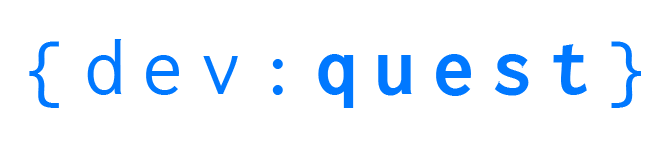
<style>
.page{position:relative;width:671px;height:149px;background:#ffffff}
.page>*{position:absolute;margin:0}
.t1{font:83.1px "Inconsolata-Regular";letter-spacing:0.2em;color:#0078ff}
.t2{font:83.1px "Inconsolata-Bold";letter-spacing:0.2em;color:#0078ff}
</style>
<div class="page">
<p class="t1" style="left:29px;top:39px;width:612px;height:69px">{dev:<span class="t2">quest</span>}</p>
</div>
